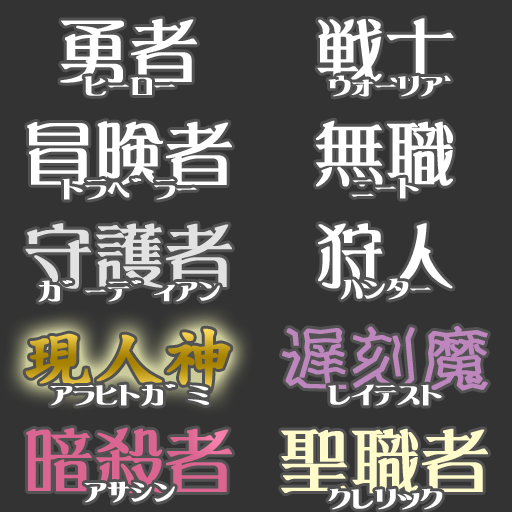
<style>
.page{position:relative;width:512px;height:512px;background:#333333}
.page>*{position:absolute;margin:0}
.t1{font:68.7px "DFLeiGaSo-W5-WIN-RKSJ-H";color:#ffffff;font-weight:bold}
.t2{font:22.6px "DFLeiGaSo-W5-WIN-RKSJ-H";color:#ffffff;font-weight:bold;scale:1.92 1}
.t3{font:68.7px "DFLeiGaSo-W5-WIN-RKSJ-H";color:#e2e2e2;font-weight:bold}
.t4{font:68.7px "DFKaiSho_U-SB-WIN-RKSJ-H";font-weight:bold}
.t5{font:68.7px "DFHorrorA-W3-WINP-RKSJ-H";color:#bd86bc;font-weight:bold}
.t6{font:68.7px "DFLeiGaSo-W5-WIN-RKSJ-H";color:#da6590;font-weight:bold}
.t7{font:68.7px "DFLeiGaSo-W5-WIN-RKSJ-H";color:#fffbca;font-weight:bold}
</style>
<div class="page">
<p class="t1" style="left:60px;top:18px;width:137px;height:66px">勇者</p>
<p class="t1" style="left:317px;top:18px;width:137px;height:65px">戦士</p>
<p class="t2" style="left:84px;top:76px;width:91px;height:20px">ﾋｰﾛｰ</p>
<p class="t2" style="left:328px;top:75px;width:115px;height:22px">ｳｫｰﾘｱ</p>
<p class="t1" style="left:27px;top:121px;width:205px;height:65px">冒険者</p>
<p class="t1" style="left:316px;top:120px;width:137px;height:67px">無職</p>
<p class="t2" style="left:62px;top:178px;width:135px;height:22px">ﾄﾗﾍﾞﾗｰ</p>
<p class="t2" style="left:351px;top:177px;width:68px;height:22px">ﾆｰﾄ</p>
<p class="t3" style="left:25px;top:223px;width:207px;height:66px">守護者</p>
<p class="t1" style="left:318px;top:223px;width:135px;height:66px">狩人</p>
<p class="t2" style="left:38px;top:280px;width:182px;height:22px">ｶﾞｰﾃﾞｨｱﾝ</p>
<p class="t2" style="left:340px;top:278px;width:91px;height:22px">ﾊﾝﾀｰ</p>
<p class="t4" style="left:25px;top:328px;width:206px;height:64px">現人神</p>
<p class="t5" style="left:282px;top:326px;width:206px;height:65px">遅刻魔</p>
<p class="t2" style="left:50px;top:384px;width:159px;height:22px">ｱﾗﾋﾄｶﾞﾐ</p>
<p class="t2" style="left:328px;top:384px;width:114px;height:22px">ﾚｲﾃｽﾄ</p>
<p class="t6" style="left:26px;top:427px;width:206px;height:67px">暗殺者</p>
<p class="t7" style="left:281px;top:428px;width:207px;height:66px">聖職者</p>
<p class="t2" style="left:84px;top:481px;width:91px;height:22px">ｱｻｼﾝ</p>
<p class="t2" style="left:328px;top:488px;width:115px;height:22px">ｸﾚﾘｯｸ</p>
</div>
